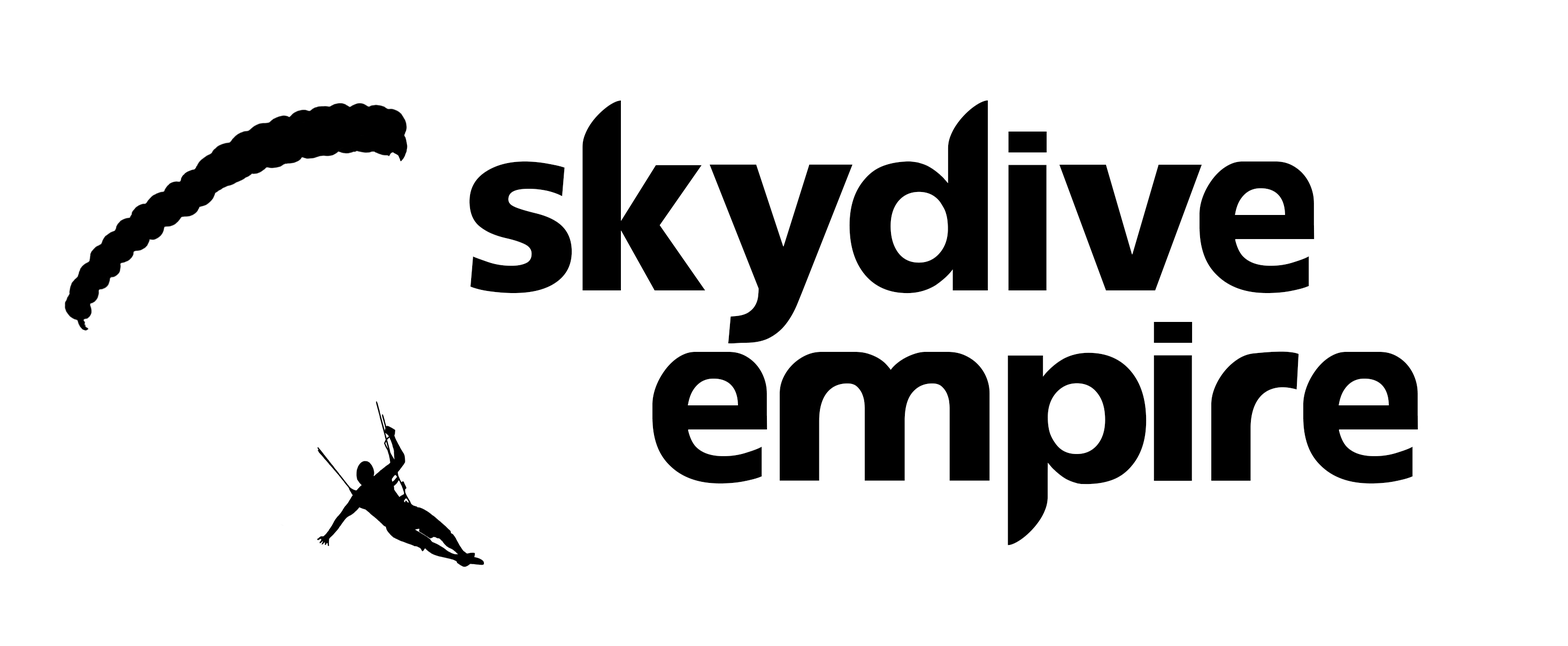
<style>
.page{position:relative;width:1568px;height:646px;background:#ffffff}
.page>*{position:absolute;margin:0}
.t1{font:160.4px "reasonSystem-Regular";color:#000000}
</style>
<div class="page">
<p class="t1" style="left:470px;top:100px;width:845px;height:244px">skydive</p>
<p class="t1" style="left:652px;top:322px;width:766px;height:223px">empire</p>
</div>
